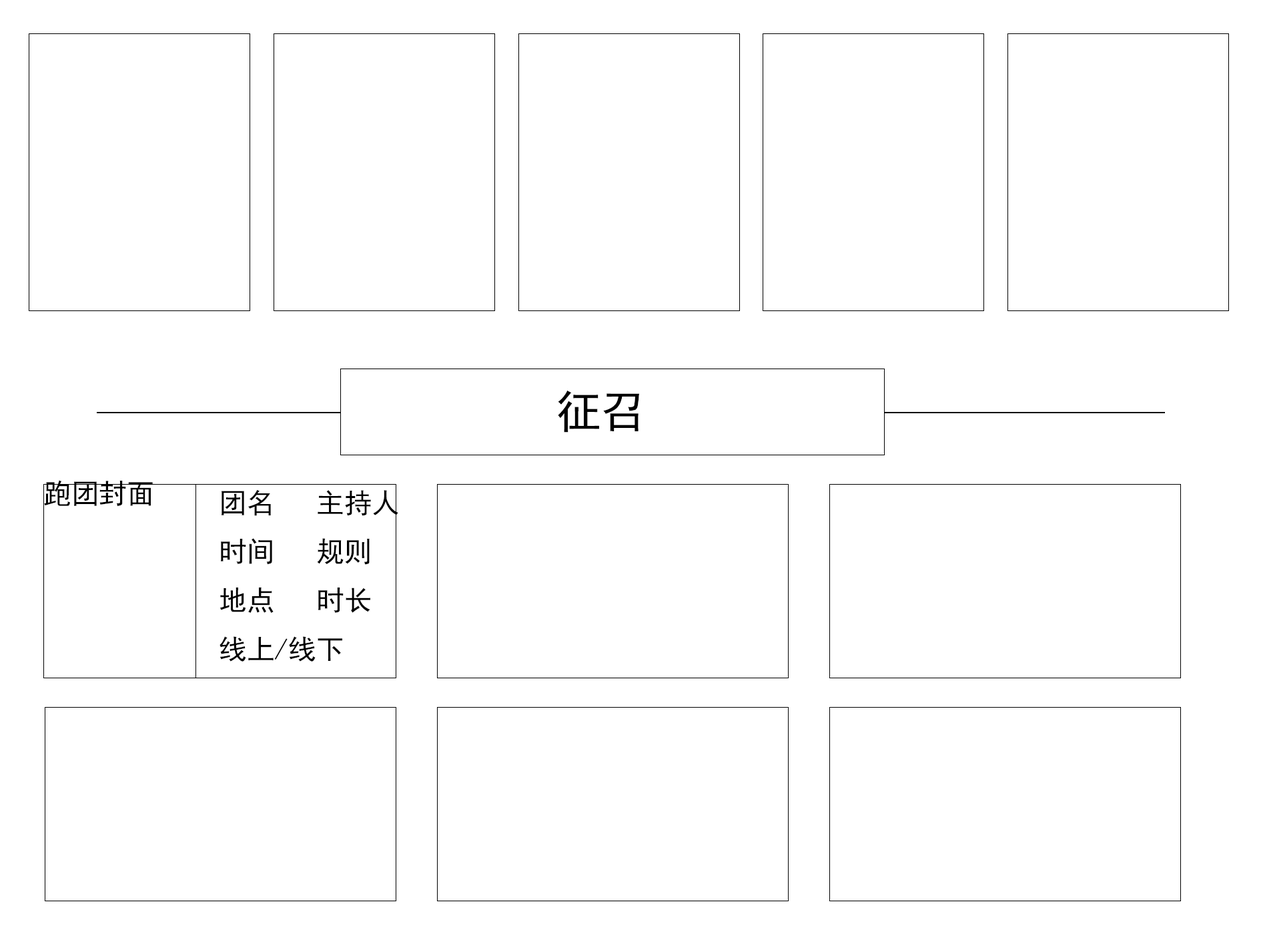
<style>
.page{position:relative;width:1261px;height:946px;background:#ffffff}
.page>*{position:absolute;margin:0}
.t1{font:44.5px "SimHei";color:#000000}
.t2{font:27.8px "SimHei";color:#000000}
</style>
<div class="page">
<p class="t1" style="left:558px;top:390px;width:81px;height:42px">征召</p>
<p class="t2" style="left:44px;top:480px;width:109px;height:26px">跑团封面</p>
<p class="t2" style="left:220px;top:489px;width:178px;height:172px">团名   主持人<br>时间   规则<br>地点   时长<br>线上/线下</p>
</div>
